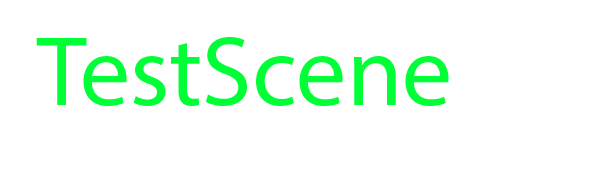
<style>
.page{position:relative;width:604px;height:180px;background:#ffffff}
.page>*{position:absolute;margin:0}
.t1{font:100px "MyriadPro-Regular";color:#00ff36}
</style>
<div class="page">
<p class="t1" style="left:36px;top:37px;width:413px;height:69px">TestScene</p>
</div>
